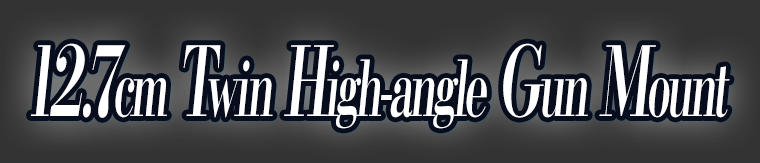
<style>
.page{position:relative;width:760px;height:163px}
.page>*{position:absolute;margin:0}
.t1{font:76.8px "KochoStd-Heavy";letter-spacing:-0.08em;color:#ffffff;font-style:italic;scale:0.57 1}
.t2{font:96px "KochoStd-Heavy";letter-spacing:-0.08em;color:#ffffff;font-style:italic;scale:0.57 1}
</style>
<div class="page">
<p class="t1" style="left:31px;top:43px;width:699px;height:86px"><span class="t2">12.7</span>cm<span class="t2"> T</span>win<span class="t2"> H</span>igh-angle<span class="t2"> G</span>un<span class="t2"> M</span>ount</p>
</div>
